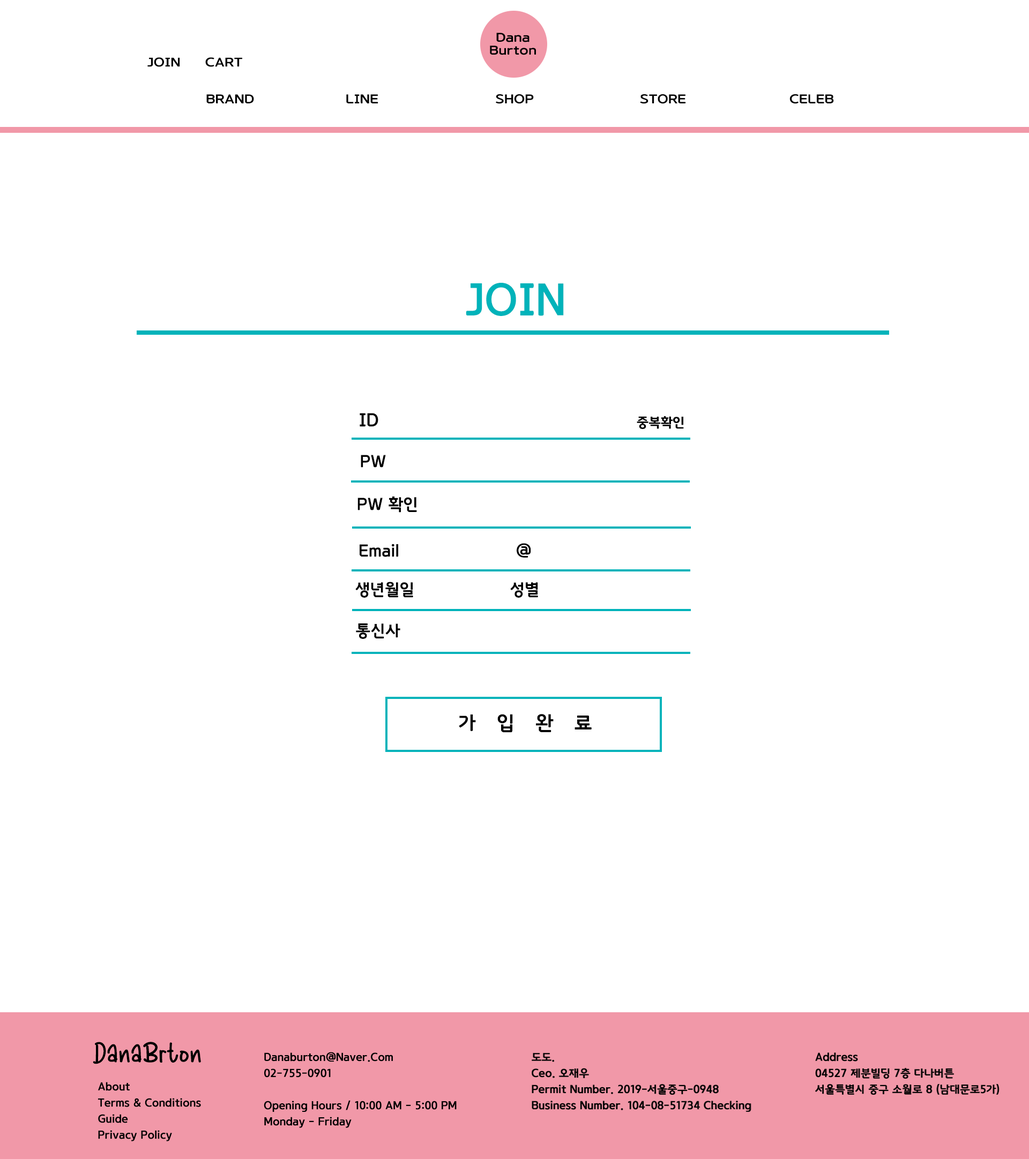
<style>
.page{position:relative;width:1029px;height:1159px;background:#ffffff}
.page>*{position:absolute;margin:0}
.t1{font:11.8px/12.9px "GodoM";color:#000000;font-weight:bold;scale:1.2 1}
.t2{font:11.8px "GodoM";color:#000000;font-weight:bold;scale:1.2 1}
.t3{font:42.9px "GodoM";color:#00b3ba;font-weight:bold}
.t4{font:17.7px "GodoM";color:#000000;font-weight:bold}
.t5{font:12.9px "GodoM";color:#000000;font-weight:bold}
.t6{font:16.1px "GodoM";color:#000000;font-weight:bold}
.t7{font:19.3px "GodoM";color:#000000;font-weight:bold}
.t8{font:38.7px "PlayfulMono-Regular";color:#000000;font-weight:bold}
.t9{font:10.7px/16.1px "GodoM";color:#000000;font-weight:bold}
</style>
<div class="page">
<p class="t1" style="left:490px;top:33px;width:46px;height:22px;text-align:center">Dana<br>Burton</p>
<p class="t2" style="left:147px;top:57px;width:95px;height:10px">JOIN  CART</p>
<p class="t2" style="left:206px;top:94px;width:628px;height:10px">BRAND             LINE          SHOP        STORE       CELEB</p>
<p class="t3" style="left:466px;top:283px;width:98px;height:33px">JOIN</p>
<p class="t4" style="left:359px;top:413px;width:19px;height:14px">ID</p>
<p class="t5" style="left:636px;top:416px;width:48px;height:13px">중복확인</p>
<p class="t6" style="left:361px;top:455px;width:25px;height:13px">PW</p>
<p class="t6" style="left:357px;top:497px;width:60px;height:16px">PW 확인</p>
<p class="t6" style="left:359px;top:544px;width:39px;height:13px">Email</p>
<p class="t6" style="left:516px;top:543px;width:15px;height:15px">@</p>
<p class="t6" style="left:355px;top:582px;width:58px;height:16px">생년월일</p>
<p class="t6" style="left:510px;top:582px;width:28px;height:16px">성별</p>
<p class="t6" style="left:356px;top:624px;width:44px;height:15px">통신사</p>
<p class="t7" style="left:459px;top:714px;width:132px;height:19px">가  입  완  료</p>
<p class="t8" style="left:93px;top:1042px;width:108px;height:22px">DanaBrton</p>
<p class="t9" style="left:264px;top:1052px;width:192px;height:76px">Danaburton@Naver.Com<br>02-755-0901<br><br>Opening Hours / 10:00 AM - 5:00 PM<br>Monday - Friday</p>
<p class="t9" style="left:531px;top:1053px;width:220px;height:59px">도도.<br>Ceo. 오재우<br>Permit Number. 2019-서울중구-0948<br>Business Number. 104-08-51734 Checking</p>
<p class="t9" style="left:815px;top:1053px;width:184px;height:42px">Address<br>04527 제분빌딩 7층 다나버튼<br>서울특별시 중구 소월로 8 (남대문로5가)</p>
<p class="t9" style="left:98px;top:1082px;width:103px;height:60px">About<br>Terms &amp; Conditions<br>Guide<br>Privacy Policy</p>
</div>
